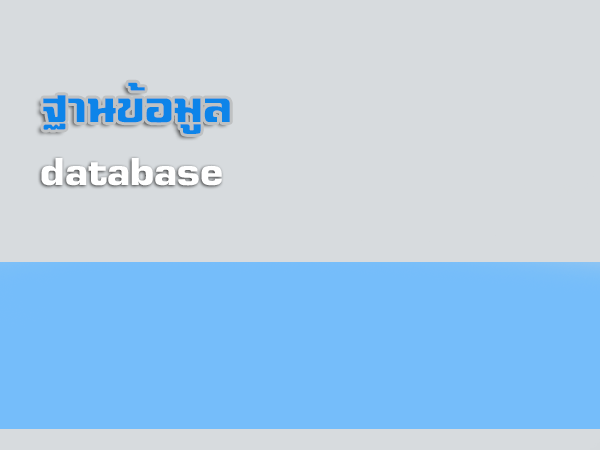
<style>
.page{position:relative;width:600px;height:450px;background:#d7dbde}
.page>*{position:absolute;margin:0}
.t1{font:60px "TP-Kubua";color:#0d84e9}
.t2{font:48px "TP-Kubua";color:#ffffff}
</style>
<div class="page">
<p class="t1" style="left:43px;top:82px;width:187px;height:52px">ฐานข้อมูล</p>
<p class="t2" style="left:41px;top:158px;width:181px;height:28px">database</p>
</div>
